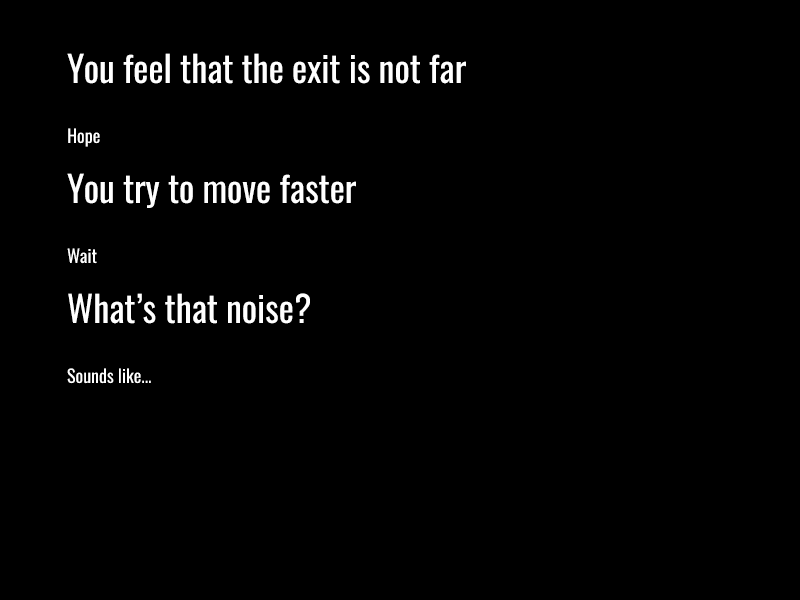
<style>
.page{position:relative;width:800px;height:600px;background:#000000}
.page>*{position:absolute;margin:0}
.t1{font:36px/60px "Oswald-Regular";color:#ffffff}
.t2{font:18px/60px "Oswald-Regular";color:#ffffff}
</style>
<div class="page">
<p class="t1" style="left:67px;top:53px;width:399px;height:331px">You feel that the exit is not far<br><span class="t2">Hope<br></span>You try to move faster<br><span class="t2">Wait<br></span>What’s that noise?<br><span class="t2">Sounds like...</span></p>
</div>
